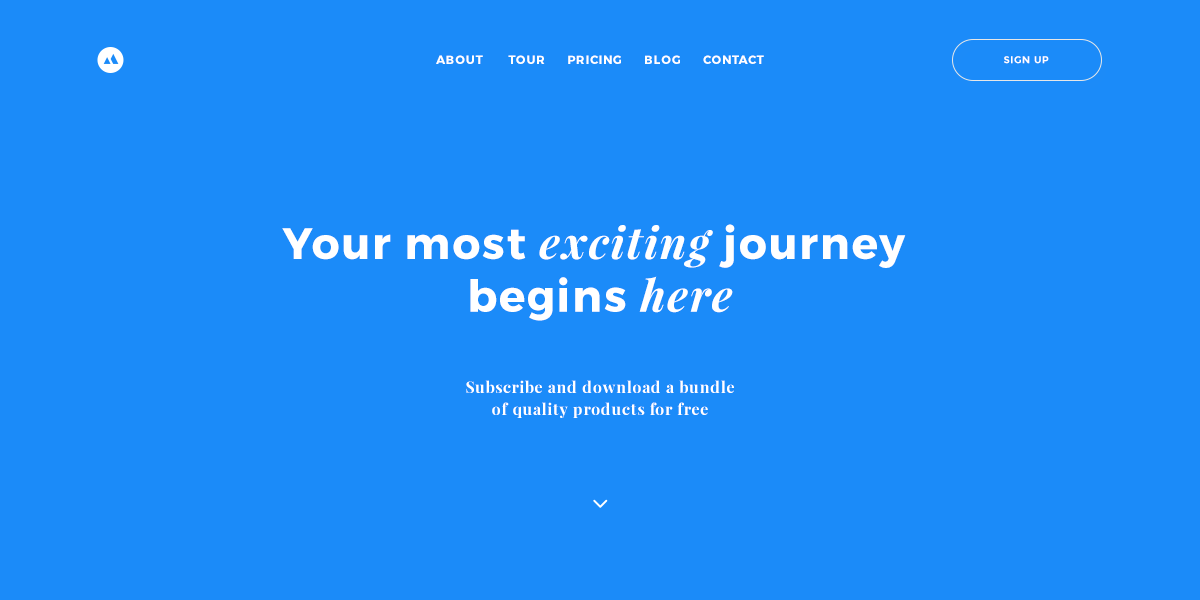
<style>
.page{position:relative;width:1200px;height:600px;background:#1b8bf9}
.page>*{position:absolute;margin:0}
.t1{font:12px "Montserrat-Bold";letter-spacing:0.05em;color:#ffffff;text-transform:uppercase}
.t2{font:10px "Montserrat-Bold";letter-spacing:0.05em;color:#ffffff;text-transform:uppercase}
.t3{font:44px "Montserrat-Bold";letter-spacing:0.04em;color:#ffffff}
.t4{font:44px "PlayfairDisplay-BoldItalic";letter-spacing:0.04em;color:#ffffff}
.t5{font:16px/22px "PlayfairDisplay-Bold";letter-spacing:0.04em;color:#ffffff}
</style>
<div class="page">
<p class="t1" style="left:436px;top:55px;width:328px;height:9px">About       Tour      Pricing      Blog      Contact</p>
<p class="t2" style="left:1004px;top:56px;width:45px;height:8px">sign up</p>
<p class="t3" style="left:282px;top:224px;width:624px;height:97px;text-align:center">Your most <span class="t4">exciting</span> journey <br>begins <span class="t4">here</span></p>
<p class="t5" style="left:466px;top:380px;width:268px;height:38px;text-align:center">Subscribe and download a bundle<br>of quality products for free</p>
</div>
